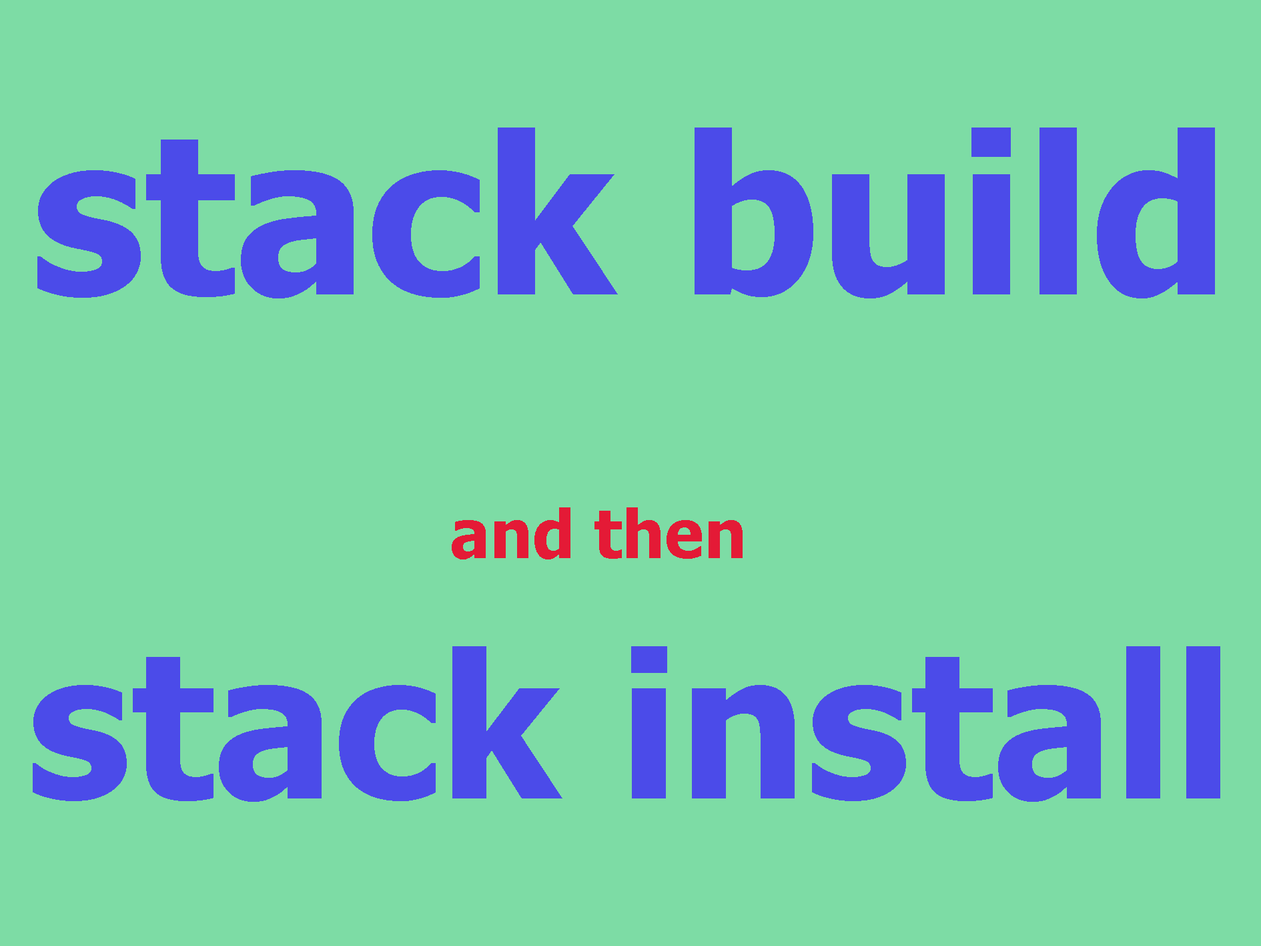
<style>
.page{position:relative;width:1261px;height:946px;background:#7ddca5}
.page>*{position:absolute;margin:0}
.t1{font:200.2px "Tahoma-Bold";color:#4b4be9}
.t2{font:219.7px "Tahoma-Bold";color:#4b4be9}
.t3{font:66.7px "Tahoma-Bold";color:#e41a36}
</style>
<div class="page">
<p class="t1" style="left:33px;top:127px;width:1187px;height:674px;text-align:center"><span class="t2">stack build<br></span><span class="t3">and then <br></span>  stack install</p>
</div>
